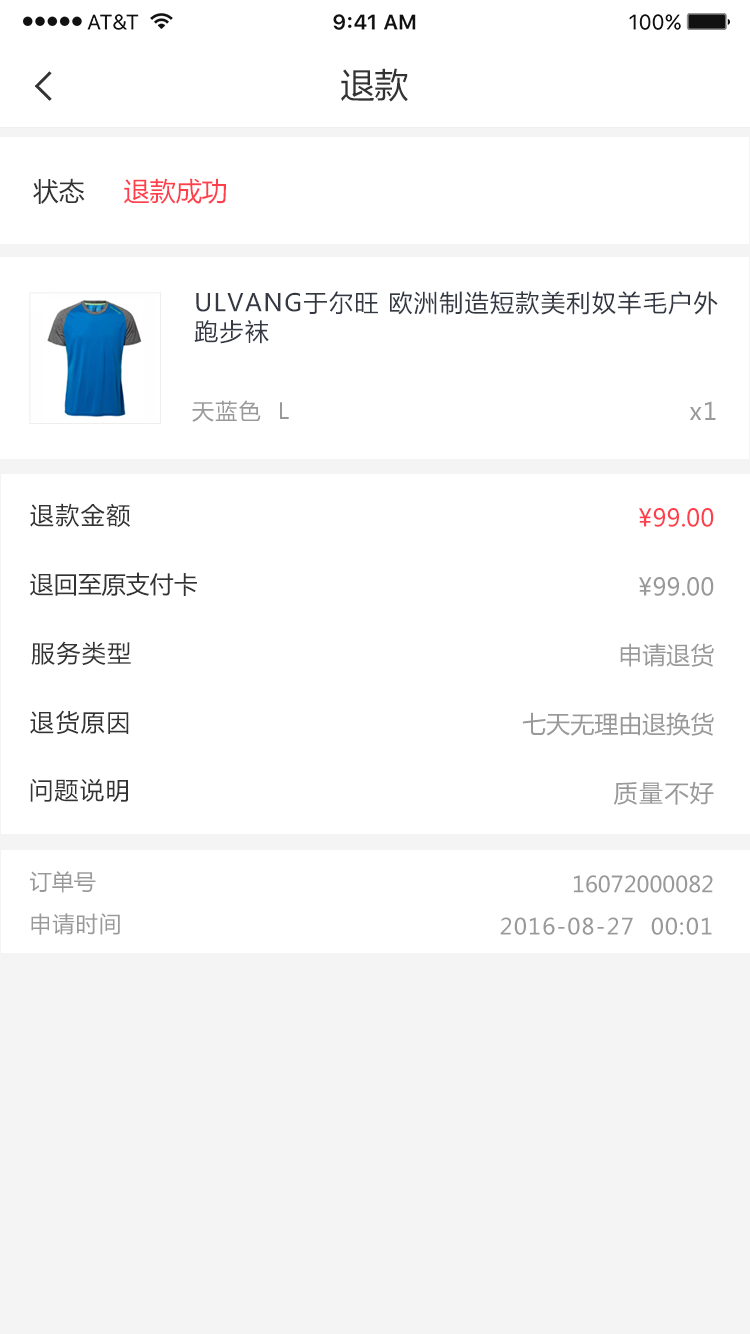
<style>
.page{position:relative;width:750px;height:1334px;background:#ffffff}
.page>*{position:absolute;margin:0}
.t1{font:34px "MicrosoftYaHei";color:#333333}
.t2{font:26px "MicrosoftYaHei";color:#333333}
.t3{font:26px "MicrosoftYaHei";color:#fe404c}
.t4{font:24px "MicrosoftYaHei";letter-spacing:0.06em;color:#343843}
.t5{font:22px "MicrosoftYaHei";letter-spacing:0.06em;color:#999999}
.t6{font:24px "MicrosoftYaHei";letter-spacing:0.06em;color:#999999}
.t7{font:24px "MicrosoftYaHei";letter-spacing:0.06em;color:#333333}
.t8{font:24px "MicrosoftYaHei";color:#fe404c}
.t9{font:24px "MicrosoftYaHei";color:#333333}
.t10{font:24px "MicrosoftYaHei";color:#999999}
.t11{font:22px "MicrosoftYaHei";color:#999999}
</style>
<div class="page">
<p class="t1" style="left:341px;top:68px;width:67px;height:34px">退款</p>
<p class="t2" style="left:33px;top:178px;width:52px;height:26px">状态</p>
<p class="t3" style="left:124px;top:178px;width:102px;height:26px">退款成功</p>
<p class="t4" style="left:194px;top:291px;width:524px;height:53px">ULVANG于尔旺 欧洲制造短款美利奴羊毛户外跑步袜</p>
<p class="t5" style="left:192px;top:400px;width:97px;height:22px">天蓝色  L</p>
<p class="t6" style="left:690px;top:401px;width:26px;height:19px">x1</p>
<p class="t7" style="left:30px;top:503px;width:100px;height:25px">退款金额</p>
<p class="t8" style="left:639px;top:508px;width:75px;height:19px">¥99.00</p>
<p class="t9" style="left:30px;top:572px;width:167px;height:25px">退回至原支付卡</p>
<p class="t10" style="left:639px;top:577px;width:75px;height:19px">¥99.00</p>
<p class="t7" style="left:31px;top:641px;width:100px;height:24px">服务类型</p>
<p class="t10" style="left:620px;top:643px;width:94px;height:24px">申请退货</p>
<p class="t7" style="left:30px;top:710px;width:99px;height:24px">退货原因</p>
<p class="t10" style="left:522px;top:712px;width:192px;height:24px">七天无理由退换货</p>
<p class="t7" style="left:30px;top:778px;width:98px;height:24px">问题说明</p>
<p class="t6" style="left:613px;top:781px;width:101px;height:24px">质量不好</p>
<p class="t11" style="left:30px;top:871px;width:66px;height:22px">订单号</p>
<p class="t11" style="left:574px;top:875px;width:139px;height:18px">16072000082</p>
<p class="t5" style="left:31px;top:913px;width:89px;height:22px">申请时间</p>
<p class="t5" style="left:500px;top:917px;width:212px;height:18px">2016-08-27  00:01</p>
</div>
